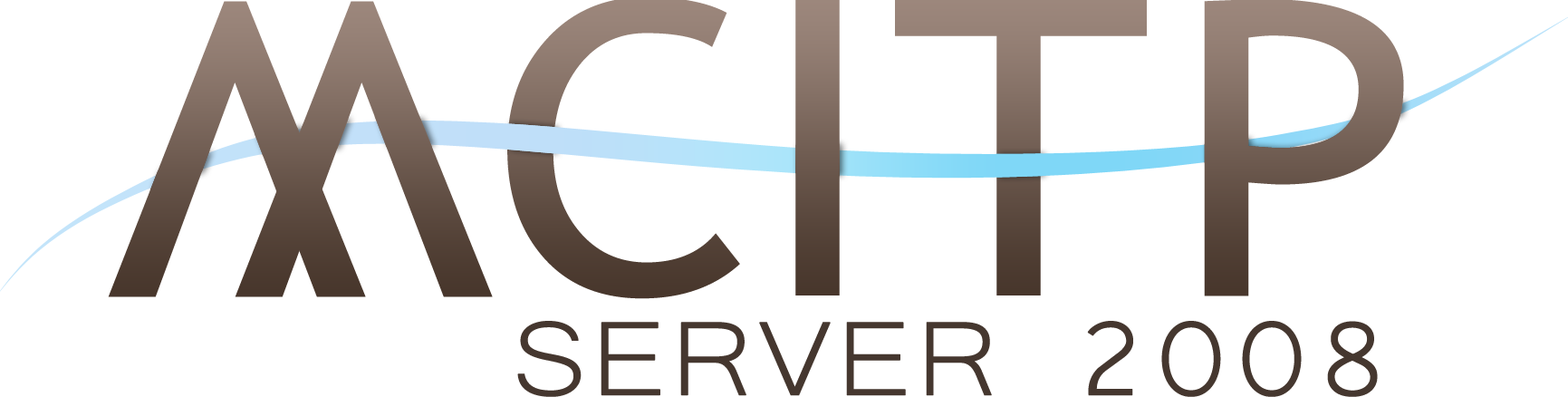
<style>
.page{position:relative;width:1568px;height:397px;background:#ffffff}
.page>*{position:absolute;margin:0}
.t1{font:406.9px "TrebuchetMS";scale:1.1 1}
.t2{font:413.4px "TrebuchetMS";scale:1.08 1}
.t3{font:411.8px "TrebuchetMS";scale:1.09 1}
.t4{font:134.9px "Microsoft-Yi-Baiti";color:#45372f;font-weight:bold;scale:1.11 1}
</style>
<div class="page">
<p class="t1" style="left:108px;top:1px;width:258px;height:296px;rotate:180deg">V</p>
<p class="t1" style="left:235px;top:1px;width:258px;height:296px;rotate:180deg">V</p>
<p class="t1" style="left:507px;top:0px;width:233px;height:299px">C</p>
<p class="t2" style="left:895px;top:0px;width:252px;height:295px">T</p>
<p class="t3" style="left:1204px;top:0px;width:200px;height:296px">P</p>
<p class="t4" style="left:517px;top:321px;width:861px;height:76px">SERVER 2008</p>
</div>
